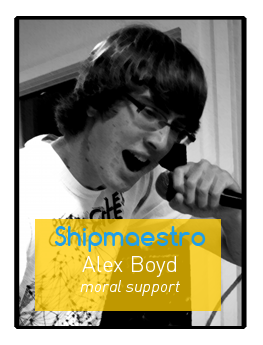
<style>
.page{position:relative;width:263px;height:345px;background:#ffffff}
.page>*{position:absolute;margin:0}
.t1{font:16.7px "DIN-LightItalicAlt";color:#ffffff}
.t2{font:25px "Comfortaa-Bold";color:#20a0ea}
.t3{font:22.2px "DIN-Light";color:#ffffff}
</style>
<div class="page">
<p class="t1" style="left:54px;top:226px;width:152px;height:70px;text-align:center"><span class="t2">Shipmaestro<br></span><span class="t3">Alex Boyd<br></span>moral support</p>
</div>
